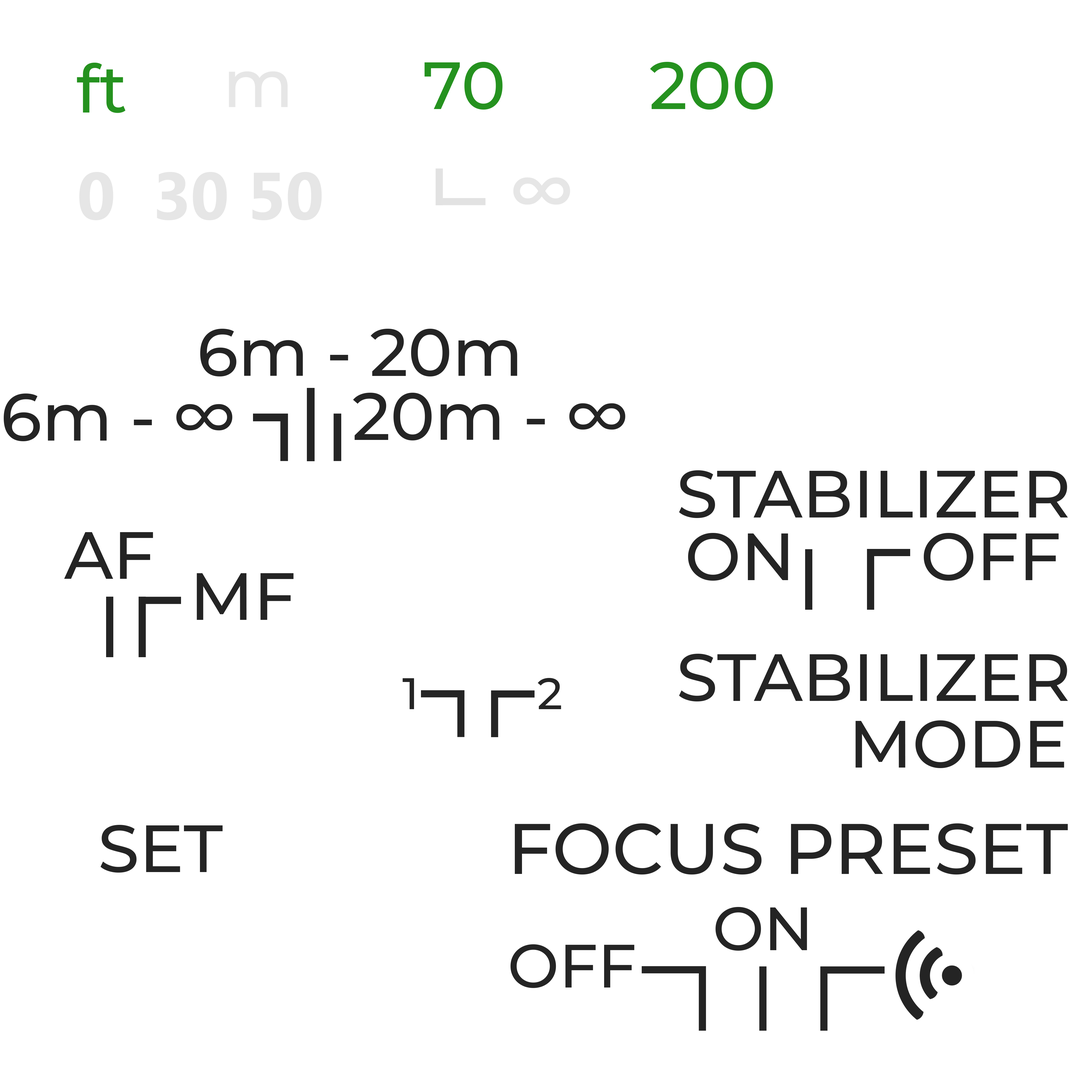
<style>
.page{position:relative;width:1092px;height:1092px;background:#ffffff}
.page>*{position:absolute;margin:0}
.t1{font:66.6px "Montserrat-Medium";color:#25921f}
.t2{font:66.6px "Montserrat-Medium";color:#e6e6e6}
.t3{font:66.6px "MicrosoftPhagsPa-Bold";color:#e6e6e6}
.t4{font:66.6px "Montserrat-SemiBold";color:#e6e6e6}
.t5{font:66.6px "Montserrat-Medium";color:#242424}
.t6{font:44.1px "Montserrat-Medium";color:#242424}
.t7{font:71.4px "Montserrat-Medium";color:#242424}
.t8{font:61px "Montserrat-Medium";color:#242424}
</style>
<div class="page">
<p class="t1" style="left:77px;top:63px;width:49px;height:50px">ft</p>
<p class="t1" style="left:424px;top:62px;width:349px;height:48px">70        200</p>
<p class="t2" style="left:229px;top:71px;width:59px;height:36px">m</p>
<p class="t3" style="left:79px;top:172px;width:243px;height:48px">0  30 50</p>
<p class="t4" style="left:513px;top:177px;width:57px;height:28px">∞</p>
<p class="t5" style="left:200px;top:329px;width:317px;height:47px">6m - 20m</p>
<p class="t5" style="left:4px;top:393px;width:228px;height:48px">6m - ∞</p>
<p class="t5" style="left:353px;top:393px;width:272px;height:47px">20m - ∞</p>
<p class="t5" style="left:679px;top:470px;width:389px;height:48px">STABILIZER</p>
<p class="t5" style="left:64px;top:532px;width:89px;height:47px">AF</p>
<p class="t5" style="left:688px;top:533px;width:371px;height:48px">ON       OFF</p>
<p class="t5" style="left:197px;top:573px;width:97px;height:47px">MF</p>
<p class="t5" style="left:679px;top:654px;width:389px;height:47px">STABILIZER</p>
<p class="t6" style="left:403px;top:678px;width:158px;height:31px">1          2</p>
<p class="t5" style="left:856px;top:720px;width:208px;height:48px">MODE</p>
<p class="t5" style="left:101px;top:825px;width:122px;height:48px">SET</p>
<p class="t7" style="left:515px;top:823px;width:553px;height:52px">FOCUS PRESET</p>
<p class="t8" style="left:715px;top:907px;width:92px;height:44px">ON</p>
<p class="t8" style="left:510px;top:944px;width:125px;height:44px">OFF</p>
</div>
